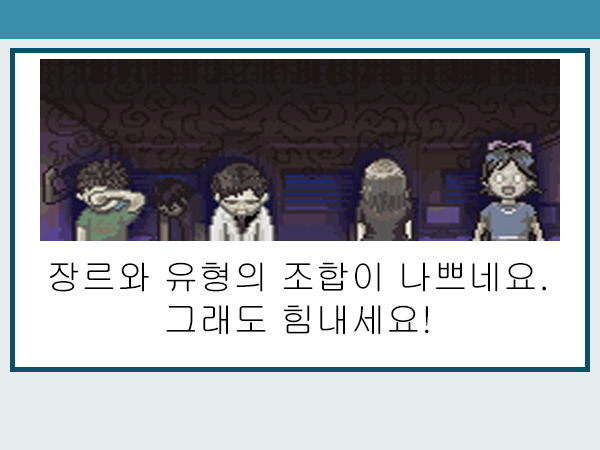
<style>
.page{position:relative;width:600px;height:450px;background:#ffffff}
.page>*{position:absolute;margin:0}
.t1{font:35.7px "Gulim";color:#000000}
</style>
<div class="page">
<p class="t1" style="left:50px;top:262px;width:496px;height:73px;text-align:center">장르와 유형의 조합이 나쁘네요.<br>그래도 힘내세요!</p>
</div>
